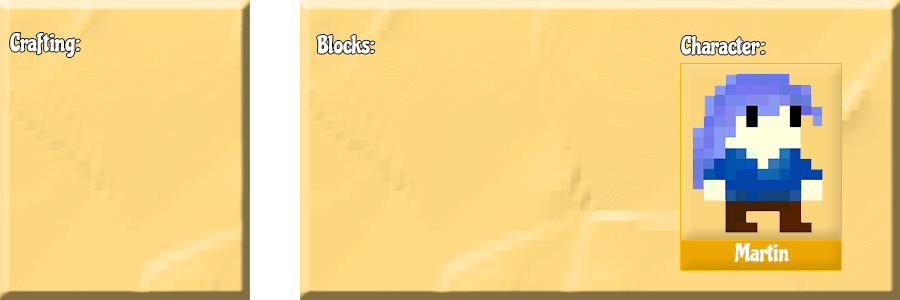
<style>
.page{position:relative;width:900px;height:300px}
.page>*{position:absolute;margin:0}
.t1{font:24.2px "Chicle-Regular";color:#ffffff}
</style>
<div class="page">
<p class="t1" style="left:10px;top:33px;width:70px;height:24px">Crafting:</p>
<p class="t1" style="left:317px;top:35px;width:58px;height:19px">Blocks:</p>
<p class="t1" style="left:681px;top:36px;width:84px;height:19px">Character:</p>
<p class="t1" style="left:734px;top:243px;width:56px;height:19px">Martin</p>
</div>
